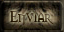
<style>
.page{position:relative;width:64px;height:32px}
.page>*{position:absolute;margin:0}
.t1{font:14px "Morpheus"}
</style>
<div class="page">
<p class="t1" style="left:10px;top:11px;width:45px;height:14px">Enviar</p>
</div>
